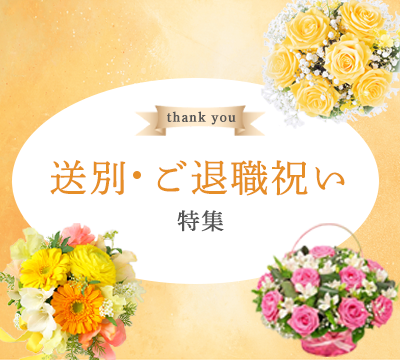
<style>
.page{position:relative;width:400px;height:360px;background:#ffffff}
.page>*{position:absolute;margin:0}
.t1{font:14.3px "DNPShueiMinPr6-M";letter-spacing:0.05em;color:#555555;font-weight:bold}
.t2{font:37.4px/37.4px "DNPShueiMinPr6-L";letter-spacing:0.05em;color:#e68e27;font-weight:bold}
.t3{font:37.4px/19.9px "DNPShueiMinPr6-L";letter-spacing:0.05em;color:#e68e27;font-weight:bold}
.t4{font:22.4px/37.4px "DNPShueiMinPr6-L";letter-spacing:0.05em;color:#555555;font-weight:bold}
</style>
<div class="page">
<p class="t1" style="left:167px;top:111px;width:69px;height:14px">thank you</p>
<p class="t2" style="left:50px;top:160px;width:295px;height:72px;text-align:center"><span class="t3">送別  </span>ご退職祝い<br><span class="t4">特集</span></p>
</div>
